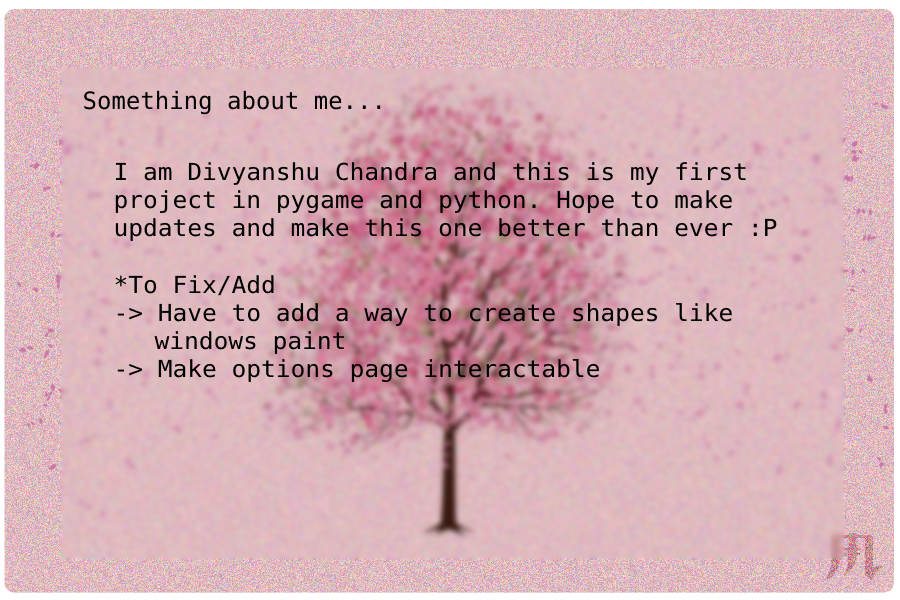
<style>
.page{position:relative;width:900px;height:600px}
.page>*{position:absolute;margin:0}
.t1{font:24px "DejaVuSansMono";color:#000000}
.t2{font:23.5px "DejaVuSansMono";color:#000000;scale:1.04 1}
</style>
<div class="page">
<p class="t1" style="left:84px;top:90px;width:297px;height:25px">Something about me...</p>
<p class="t2" style="left:115px;top:162px;width:662px;height:221px">I am Divyanshu Chandra and this is my first <br>project in pygame and python. Hope to make<br>updates and make this one better than ever :P<br><br>*To Fix/Add<br>-&gt; Have to add a way to create shapes like <br> windows paint<br>-&gt; Make options page interactable</p>
</div>
